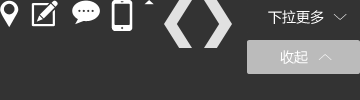
<style>
.page{position:relative;width:360px;height:100px;background:#333333}
.page>*{position:absolute;margin:0}
.t1{font:14px "MicrosoftYaHei";color:#ffffff}
.t2{font:17.9px "SimSun";scale:0.89 1}
</style>
<div class="page">
<p class="t1" style="left:268px;top:10px;width:56px;height:14px">下拉更多</p>
<p class="t2" style="left:333px;top:14px;width:14px;height:6px;rotate:90deg">&gt;</p>
<p class="t1" style="left:280px;top:50px;width:28px;height:14px">收起</p>
<p class="t2" style="left:318px;top:54px;width:14px;height:6px;rotate:-90deg">&gt;</p>
</div>
